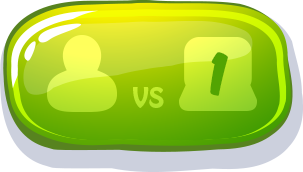
<style>
.page{position:relative;width:303px;height:172px}
.page>*{position:absolute;margin:0}
.t1{font:50px "KomikaAxis";color:#52a402}
.t2{font:31.5px "HoboStd";color:#bbe92d}
</style>
<div class="page">
<p class="t1" style="left:210px;top:52px;width:18px;height:44px">1</p>
<p class="t2" style="left:133px;top:87px;width:31px;height:21px">vs</p>
</div>
